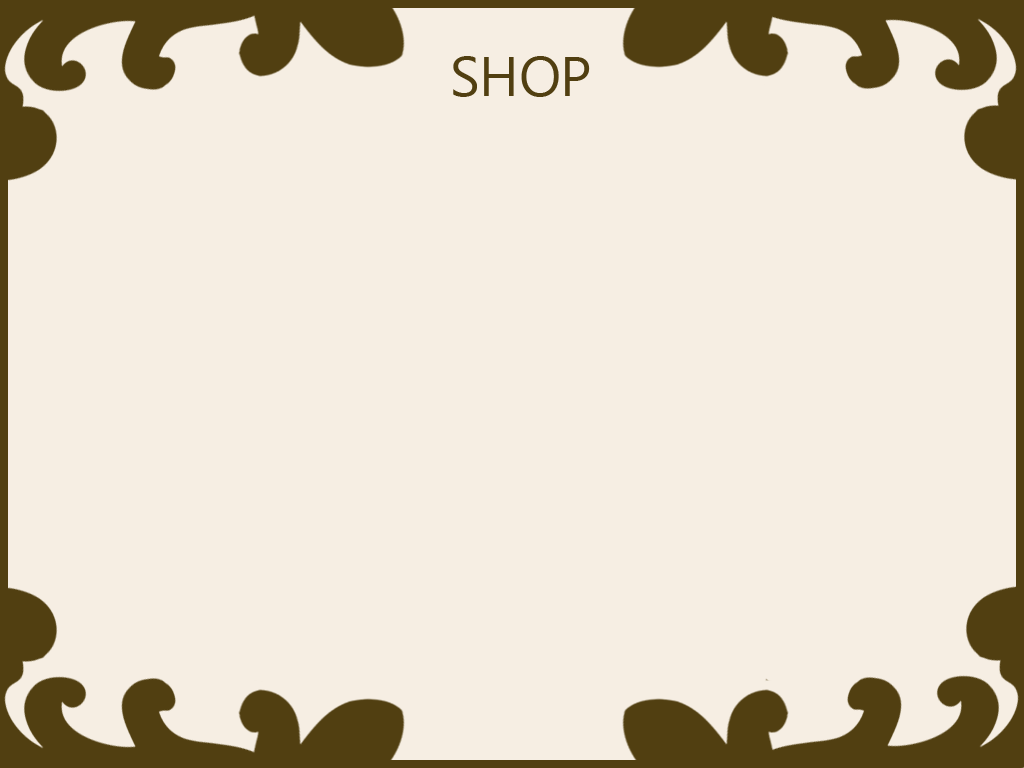
<style>
.page{position:relative;width:1024px;height:768px;background:#f6eee3}
.page>*{position:absolute;margin:0}
.t1{font:55.6px "SegoeUI";color:#513f11}
</style>
<div class="page">
<p class="t1" style="left:453px;top:56px;width:137px;height:41px">SHOP</p>
</div>
